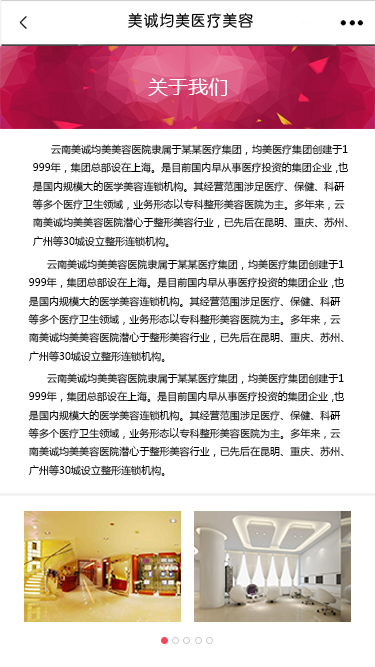
<style>
.page{position:relative;width:375px;height:667px;background:#ffffff}
.page>*{position:absolute;margin:0}
.t1{font:20px "MicrosoftYaHei";letter-spacing:0.005em;color:#ffffff}
.t2{font:10px/18.3px "MicrosoftYaHei";letter-spacing:0.005em;color:#000000}
</style>
<div class="page">
<p class="t1" style="left:148px;top:78px;width:79px;height:18px">关于我们</p>
<p class="t2" style="left:32px;top:144px;width:317px;height:103px">云南美诚均美美容医院隶属于某某医疗集团，均美医疗集团创建于1<br>999年，集团总部设在上海。是目前国内早从事医疗投资的集团企业，也<br>是国内规模大的医学美容连锁机构。其经营范围涉足医疗、保健、科研<br>等多个医疗卫生领域，业务形态以专科整形美容医院为主。多年来，云<br>南美诚均美美容医院潜心于整形美容行业，已先后在昆明、重庆、苏州、<br>广州等30城设立整形连锁机构。</p>
<p class="t2" style="left:28px;top:259px;width:317px;height:103px">云南美诚均美美容医院隶属于某某医疗集团，均美医疗集团创建于1<br>999年，集团总部设在上海。是目前国内早从事医疗投资的集团企业，也<br>是国内规模大的医学美容连锁机构。其经营范围涉足医疗、保健、科研<br>等多个医疗卫生领域，业务形态以专科整形美容医院为主。多年来，云<br>南美诚均美美容医院潜心于整形美容行业，已先后在昆明、重庆、苏州、<br>广州等30城设立整形连锁机构。</p>
<p class="t2" style="left:28px;top:373px;width:317px;height:103px">云南美诚均美美容医院隶属于某某医疗集团，均美医疗集团创建于1<br>999年，集团总部设在上海。是目前国内早从事医疗投资的集团企业，也<br>是国内规模大的医学美容连锁机构。其经营范围涉足医疗、保健、科研<br>等多个医疗卫生领域，业务形态以专科整形美容医院为主。多年来，云<br>南美诚均美美容医院潜心于整形美容行业，已先后在昆明、重庆、苏州、<br>广州等30城设立整形连锁机构。</p>
</div>
